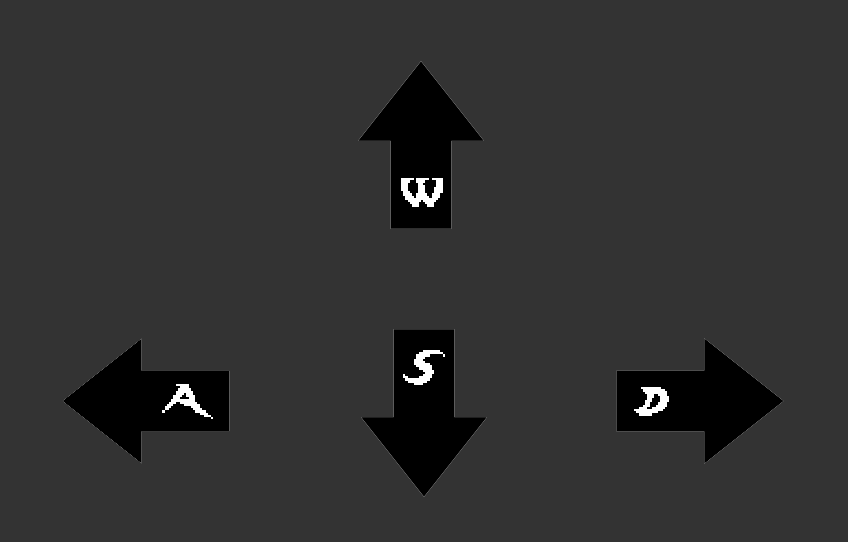
<style>
.page{position:relative;width:848px;height:542px;background:#333333}
.page>*{position:absolute;margin:0}
.t1{font:35px "Lady-Radical";color:#ffffff}
</style>
<div class="page">
<p class="t1" style="left:401px;top:178px;width:42px;height:29px">W</p>
<p class="t1" style="left:403px;top:350px;width:42px;height:35px">S</p>
<p class="t1" style="left:162px;top:384px;width:51px;height:35px">A</p>
<p class="t1" style="left:634px;top:387px;width:35px;height:29px">D</p>
</div>
